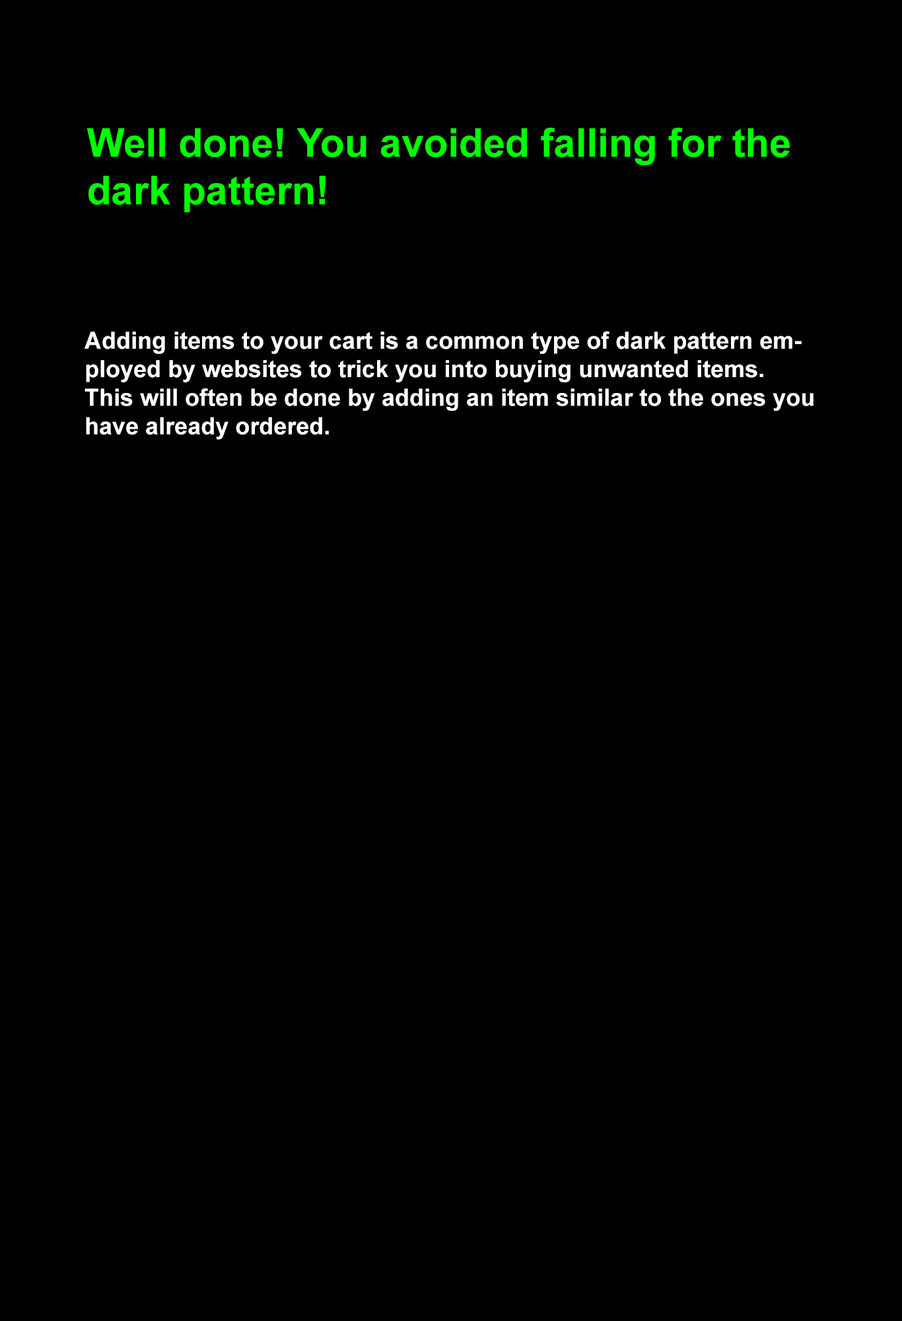
<style>
.page{position:relative;width:902px;height:1321px;background:#000000}
.page>*{position:absolute;margin:0}
.t1{font:39.6px "Arial-BoldMT";color:#00ff00}
.t2{font:23.8px "Arial-BoldMT";color:#ffffff}
</style>
<div class="page">
<p class="t1" style="left:87px;top:128px;width:703px;height:85px">Well done! You avoided falling for the dark pattern!</p>
<p class="t2" style="left:85px;top:331px;width:729px;height:109px">Adding items to your cart is a common type of dark pattern employed by websites to trick you into buying unwanted items. This will often be done by adding an item similar to the ones you have already ordered.</p>
</div>
